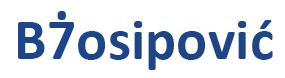
<style>
.page{position:relative;width:285px;height:78px;background:#ffffff}
.page>*{position:absolute;margin:0}
.t1{font:58.3px "Calibri-Bold";color:#1d4589}
</style>
<div class="page">
<p class="t1" style="left:57px;top:11px;width:9px;height:9px">.</p>
<p class="t1" style="left:18px;top:20px;width:255px;height:50px">B7osipović</p>
</div>
